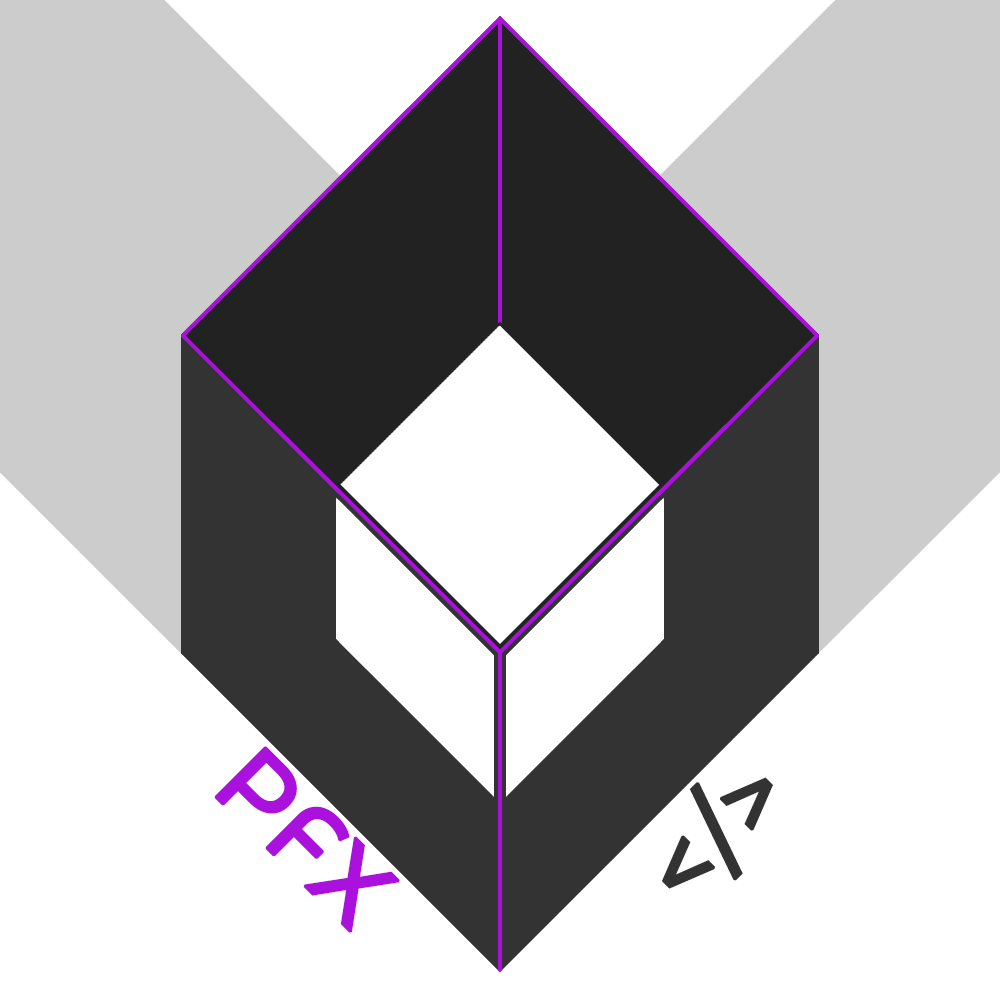
<style>
.page{position:relative;width:1000px;height:1000px;background:#ffffff}
.page>*{position:absolute;margin:0}
.t1{font:100px "Montserrat-Medium";color:#aa11dd;font-weight:bold}
.t2{font:100px "Montserrat-Medium";color:#333333;font-weight:bold}
</style>
<div class="page">
<p class="t1" style="left:214px;top:746px;width:186px;height:187px;rotate:45deg">PFX</p>
<p class="t2" style="left:662px;top:777px;width:111px;height:112px;rotate:-45deg">&lt;/&gt;</p>
</div>
